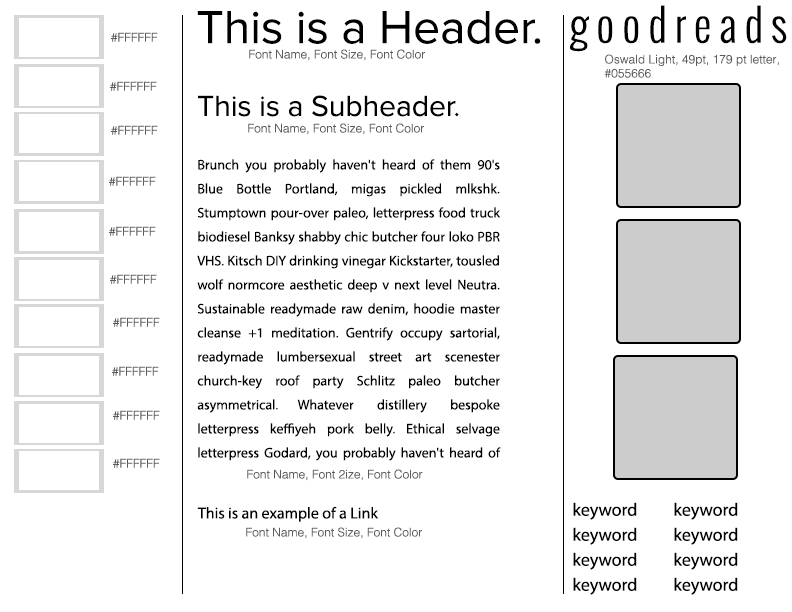
<style>
.page{position:relative;width:792px;height:612px;background:#ffffff}
.page>*{position:absolute;margin:0}
.t1{font:44px "Oswald-Light";letter-spacing:0.179em;color:#000000}
.t2{font:48px "ProximaNova-Regular";color:#000000}
.t3{font:12px "Helvetica-Light";color:#5b5b5b}
.t4{font:12px/14px "Helvetica-Light";color:#5b5b5b}
.t5{font:30px "ProximaNova-Regular";color:#000000}
.t6{font:14px/24px "MyriadPro-Regular";color:#000000}
.t7{font:16px "MyriadPro-Regular";color:#000000}
.t8{font:18px "MyriadPro-Regular";color:#000000}
</style>
<div class="page">
<p class="t1" style="left:570px;top:5px;width:217px;height:47px">goodreads</p>
<p class="t2" style="left:197px;top:11px;width:344px;height:33px">This is a Header.</p>
<p class="t3" style="left:111px;top:32px;width:47px;height:10px">#FFFFFF</p>
<p class="t3" style="left:249px;top:49px;width:176px;height:12px">Font Name, Font Size, Font Color</p>
<p class="t4" style="left:604px;top:54px;width:175px;height:24px">Oswald Light, 49pt, 179 pt letter,<br>#055666</p>
<p class="t3" style="left:110px;top:81px;width:47px;height:10px">#FFFFFF</p>
<p class="t5" style="left:198px;top:95px;width:261px;height:22px">This is a Subheader.</p>
<p class="t3" style="left:111px;top:125px;width:47px;height:10px">#FFFFFF</p>
<p class="t3" style="left:248px;top:123px;width:176px;height:12px">Font Name, Font Size, Font Color</p>
<p class="t6" style="left:197px;top:159px;width:304px;height:302px;text-align:justify">Brunch you probably haven't heard of them 90's Blue Bottle Portland, migas pickled mlkshk. Stumptown pour-over paleo, letterpress food truck biodiesel Banksy shabby chic butcher four loko PBR VHS. Kitsch DIY drinking vinegar Kickstarter, tousled wolf normcore aesthetic deep v next level Neutra. Sustainable readymade raw denim, hoodie master cleanse +1 meditation. Gentrify occupy sartorial, readymade lumbersexual street art scenester church-key roof party Schlitz paleo butcher asymmetrical. Whatever distillery bespoke letterpress keffiyeh pork belly. Ethical selvage letterpress Godard, you probably haven't heard of them distillery normcore 90's whatever.</p>
<p class="t3" style="left:109px;top:176px;width:47px;height:10px">#FFFFFF</p>
<p class="t3" style="left:109px;top:226px;width:47px;height:10px">#FFFFFF</p>
<p class="t3" style="left:110px;top:274px;width:47px;height:10px">#FFFFFF</p>
<p class="t3" style="left:113px;top:317px;width:47px;height:10px">#FFFFFF</p>
<p class="t3" style="left:112px;top:366px;width:47px;height:10px">#FFFFFF</p>
<p class="t3" style="left:113px;top:410px;width:47px;height:10px">#FFFFFF</p>
<p class="t3" style="left:113px;top:458px;width:47px;height:10px">#FFFFFF</p>
<p class="t3" style="left:247px;top:469px;width:176px;height:12px">Font Name, Font 2ize, Font Color</p>
<p class="t7" style="left:197px;top:506px;width:182px;height:16px">This is an example of a Link</p>
<p class="t8" style="left:573px;top:502px;width:64px;height:18px">keyword</p>
<p class="t8" style="left:674px;top:502px;width:64px;height:18px">keyword</p>
<p class="t3" style="left:246px;top:527px;width:176px;height:12px">Font Name, Font Size, Font Color</p>
<p class="t8" style="left:573px;top:527px;width:64px;height:18px">keyword</p>
<p class="t8" style="left:674px;top:527px;width:64px;height:18px">keyword</p>
<p class="t8" style="left:573px;top:552px;width:64px;height:18px">keyword</p>
<p class="t8" style="left:674px;top:552px;width:64px;height:18px">keyword</p>
<p class="t8" style="left:573px;top:577px;width:64px;height:18px">keyword</p>
<p class="t8" style="left:674px;top:577px;width:64px;height:18px">keyword</p>
</div>
